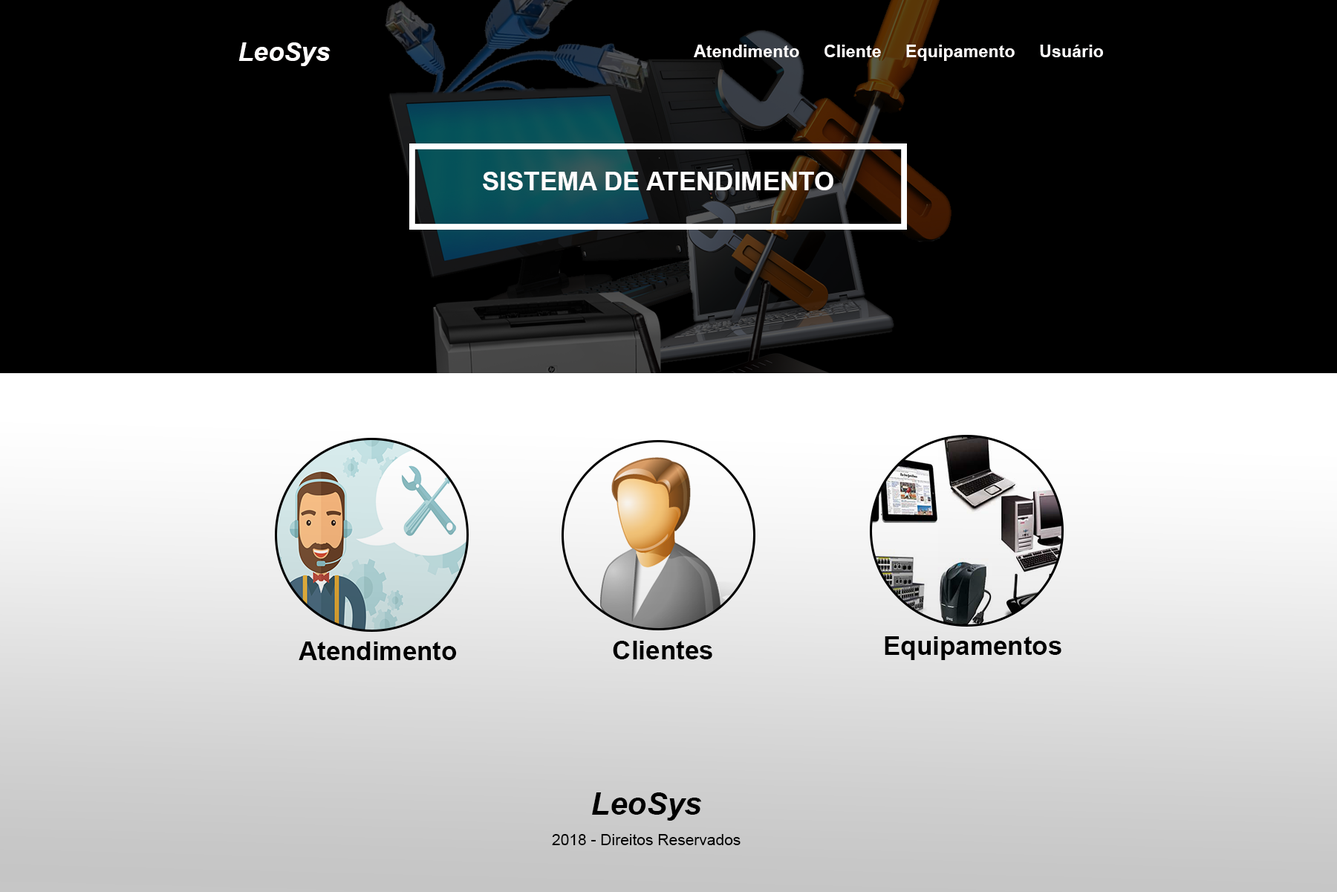
<style>
.page{position:relative;width:1337px;height:892px;background:#000000}
.page>*{position:absolute;margin:0}
.t1{font:44.6px "Arial-BoldItalicMT";color:#fffdfd}
.t2{font:29.7px "Arial-BoldMT";color:#fffdfd}
.t3{font:44.6px "Arial-BoldMT";color:#fffdfd}
.t4{font:44.6px "Arial-BoldMT";color:#000000}
.t5{font:53.5px "Arial-BoldItalicMT";color:#000000}
.t6{font:26.7px "ArialMT";color:#000000}
</style>
<div class="page">
<p class="t1" style="left:239px;top:42px;width:92px;height:24px">LeoSys</p>
<p class="t2" style="left:694px;top:45px;width:409px;height:16px">Atendimento     Cliente     Equipamento     Usuário</p>
<p class="t3" style="left:483px;top:172px;width:351px;height:18px">SISTEMA DE ATENDIMENTO</p>
<p class="t4" style="left:299px;top:641px;width:158px;height:19px">Atendimento</p>
<p class="t4" style="left:613px;top:640px;width:100px;height:19px">Clientes</p>
<p class="t4" style="left:885px;top:636px;width:177px;height:24px">Equipamentos</p>
<p class="t5" style="left:592px;top:792px;width:110px;height:28px">LeoSys</p>
<p class="t6" style="left:552px;top:834px;width:189px;height:11px">2018 - Direitos Reservados</p>
</div>
